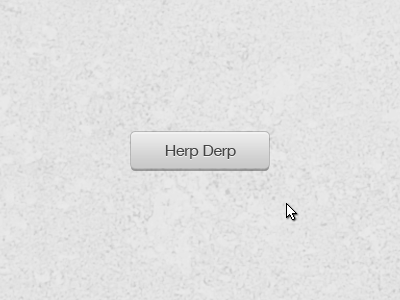
<style>
.page{position:relative;width:400px;height:300px}
.page>*{position:absolute;margin:0}
.t1{font:16px "HelveticaNeue";letter-spacing:-0.02em;color:#444444}
</style>
<div class="page">
<p class="t1" style="left:165px;top:145px;width:71px;height:14px">Herp Derp</p>
</div>
